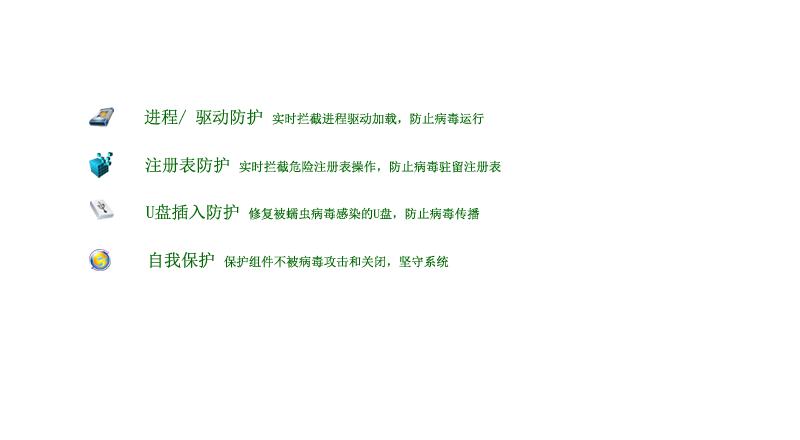
<style>
.page{position:relative;width:800px;height:440px;background:#ffffff}
.page>*{position:absolute;margin:0}
.t1{font:12.5px "SimSun";color:#046904}
.t2{font:17.1px "SimSun";color:#046904}
</style>
<div class="page">
<p class="t1" style="left:144px;top:109px;width:340px;height:16px"><span class="t2">进程/ 驱动防护 </span>实时拦截进程驱动加载，防止病毒运行</p>
<p class="t1" style="left:145px;top:157px;width:356px;height:16px"><span class="t2">注册表防护 </span>实时拦截危险注册表操作，防止病毒驻留注册表</p>
<p class="t1" style="left:146px;top:204px;width:334px;height:16px"><span class="t2">U盘插入防护 </span>修复被蠕虫病毒感染的U盘，防止病毒传播</p>
<p class="t1" style="left:150px;top:252px;width:299px;height:16px"><span class="t2">自我保护 </span>保护组件不被病毒攻击和关闭，坚守系统</p>
</div>
